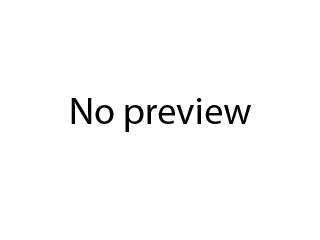
<style>
.page{position:relative;width:320px;height:240px;background:#ffffff}
.page>*{position:absolute;margin:0}
.t1{font:38.4px "MyriadPro-Regular";color:#000000}
</style>
<div class="page">
<p class="t1" style="left:71px;top:98px;width:180px;height:34px">No preview</p>
</div>
